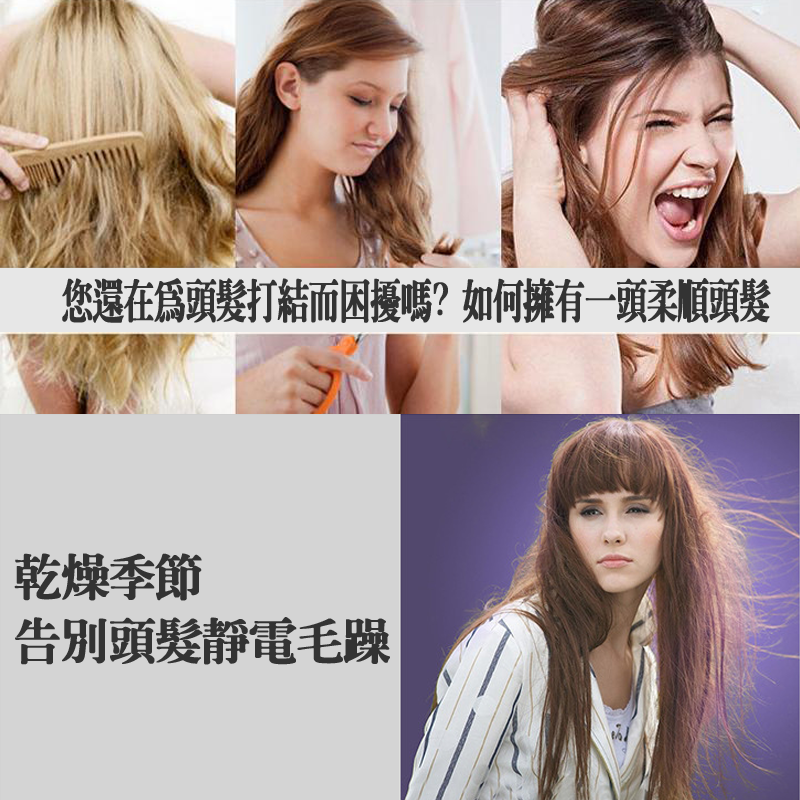
<style>
.page{position:relative;width:800px;height:800px;background:#d4d4d4}
.page>*{position:absolute;margin:0}
.t1{font:45.7px "HanWangMingHeavy";letter-spacing:-0.05em;color:#333333;font-weight:bold;scale:0.69 1}
.t2{font:48.1px/64.2px "HanWangMingHeavy";letter-spacing:-0.05em;color:#333333;font-weight:bold}
</style>
<div class="page">
<p class="t1" style="left:62px;top:278px;width:709px;height:45px">您還在為頭髮打結而困擾嗎? 如何擁有一頭柔順頭髮</p>
<p class="t2" style="left:14px;top:553px;width:376px;height:112px">乾燥季節<br>告別頭髮靜電毛躁</p>
</div>
